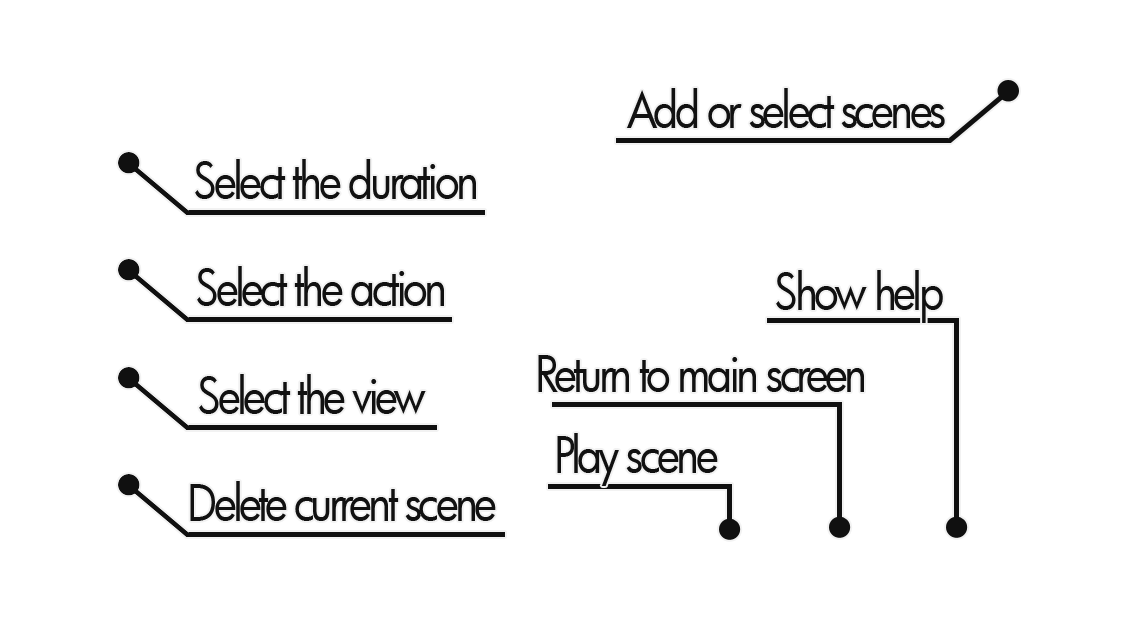
<style>
.page{position:relative;width:1136px;height:640px;background:#ffffff}
.page>*{position:absolute;margin:0}
.t1{font:48.9px "Futura-Book";letter-spacing:-0.08em;color:#111111;scale:0.89 1}
</style>
<div class="page">
<p class="t1" style="left:626px;top:88px;width:319px;height:40px">Add or select scenes</p>
<p class="t1" style="left:195px;top:159px;width:281px;height:40px">Select the duration</p>
<p class="t1" style="left:197px;top:266px;width:247px;height:40px">Select the action</p>
<p class="t1" style="left:776px;top:270px;width:167px;height:53px">Show help</p>
<p class="t1" style="left:538px;top:355px;width:326px;height:37px">Return to main screen</p>
<p class="t1" style="left:199px;top:374px;width:227px;height:40px">Select the view</p>
<p class="t1" style="left:557px;top:433px;width:161px;height:53px">Play scene</p>
<p class="t1" style="left:190px;top:481px;width:306px;height:40px">Delete current scene</p>
</div>
